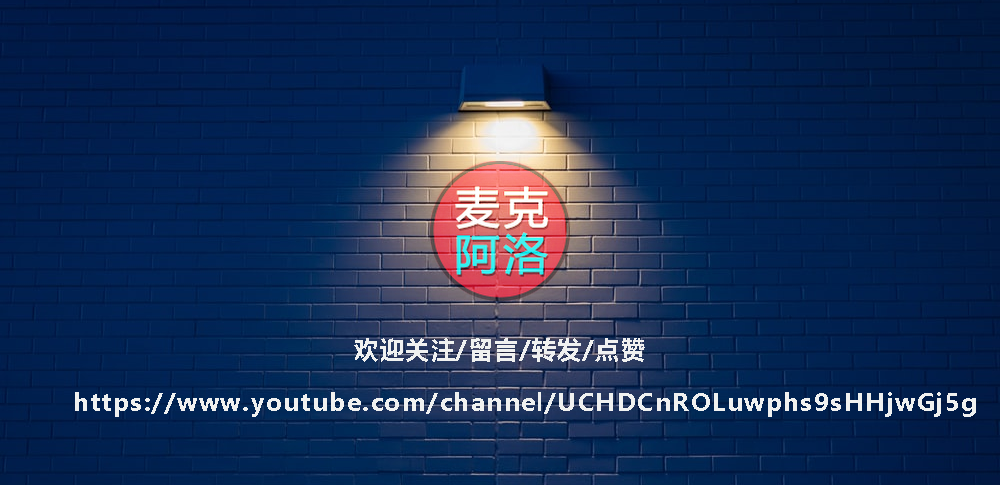
<style>
.page{position:relative;width:1000px;height:485px}
.page>*{position:absolute;margin:0}
.t1{font:24.4px "MicrosoftYaHei-Bold";letter-spacing:0.06em;color:#f0f1f0}
</style>
<div class="page">
<p class="t1" style="left:354px;top:338px;width:291px;height:24px">欢迎关注/留言/转发/点赞</p>
<p class="t1" style="left:75px;top:392px;width:901px;height:25px">https://www.youtube.com/channel/UCHDCnROLuwphs9sHHjwGj5g</p>
</div>
